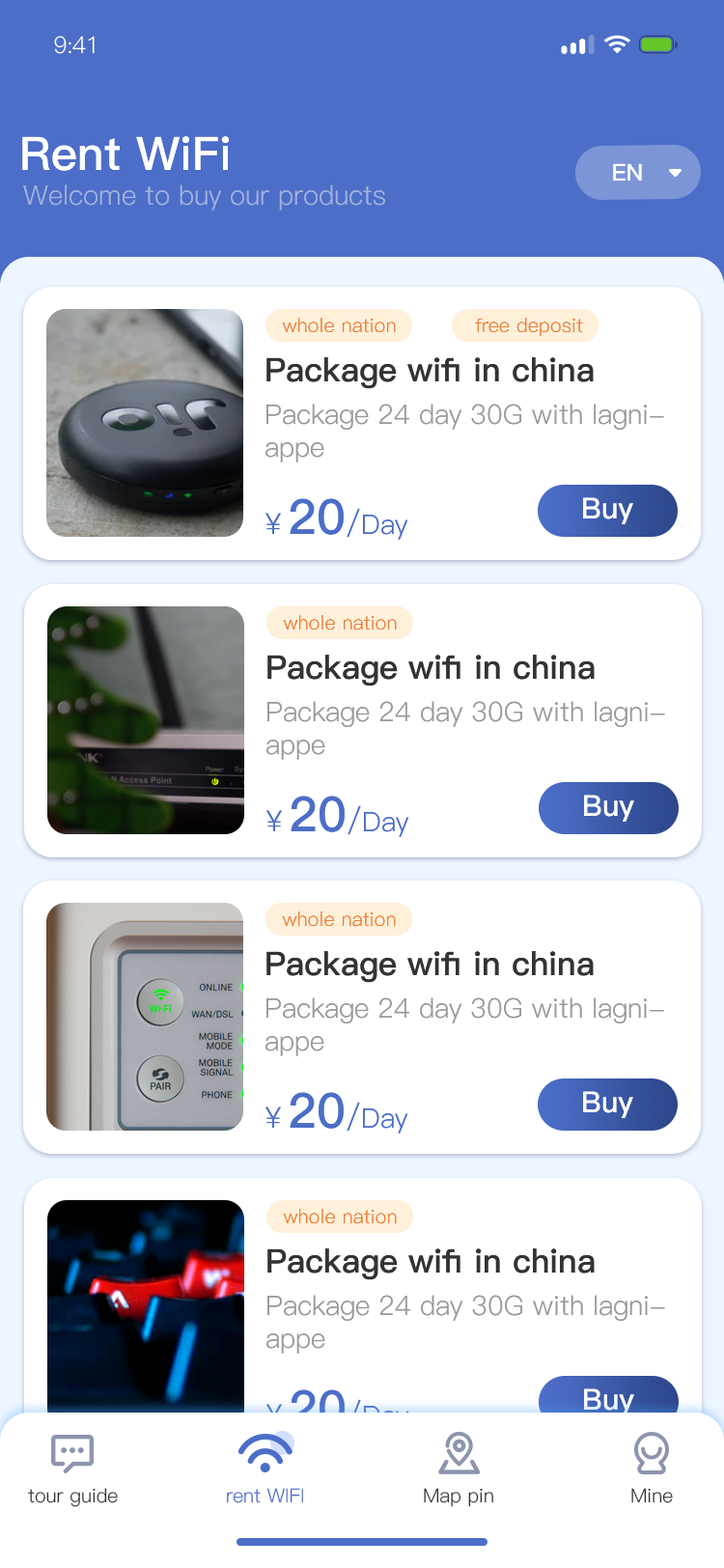
<style>
.page{position:relative;width:724px;height:1568px;background:#ffffff}
.page>*{position:absolute;margin:0}
.t1{font:23.2px "PingFang-SC-Regular";letter-spacing:-0.025em;color:#ffffff}
.t2{font:46.3px "PingFang-SC-Bold";color:#ffffff}
.t3{font:23.2px "PingFang-SC-Bold";color:#ffffff}
.t4{font:27px "PingFang-SC-Regular";color:#a3b2dd}
.t5{font:19.3px "PingFang-SC-Regular";color:#ee7d39}
.t6{font:32.8px "PingFang-SC-Bold";color:#333333}
.t7{font:32.8px "PingFang-SC-Bold";color:#333333;text-transform:uppercase}
.t8{font:27px "PingFang-SC-Regular";color:#999999}
.t9{font:29px "PingFang-SC-Bold";color:#ffffff}
.t10{font:27px "PingFang-SC-Regular";color:#4c6ec8}
.t11{font:29px "PingFang-SC-Regular";color:#4c6ec8}
.t12{font:48.3px "PingFang-SC-Bold";color:#4c6ec8}
.t13{font:30.9px "PingFang-SC-Regular";color:#4c6ec8}
.t14{font:27px "PingFang-SC-Regular"}
.t15{font:29px "PingFang-SC-Regular"}
.t16{font:48.3px "PingFang-SC-Bold"}
.t17{font:30.9px "PingFang-SC-Regular"}
.t18{font:19.3px "PingFang-SC-Regular";color:#333333}
.t19{font:19.3px "PingFang-SC-Regular";color:#4c6ec8}
</style>
<div class="page">
<p class="t1" style="left:54px;top:36px;width:41px;height:18px">9:41</p>
<p class="t2" style="left:22px;top:136px;width:207px;height:35px">Rent WiFi</p>
<p class="t3" style="left:613px;top:163px;width:29px;height:18px">EN</p>
<p class="t4" style="left:23px;top:184px;width:362px;height:26px">Welcome to buy our products</p>
<p class="t5" style="left:282px;top:318px;width:114px;height:14px">whole nation</p>
<p class="t5" style="left:475px;top:318px;width:108px;height:18px">free deposit</p>
<p class="t6" style="left:266px;top:357px;width:328px;height:32px"><span class="t7">p</span>ackage wifi in china</p>
<p class="t8" style="left:266px;top:404px;width:398px;height:58px">Package 24 day 30G with lagni-<br>appe</p>
<p class="t9" style="left:583px;top:497px;width:50px;height:27px">Buy</p>
<p class="t10" style="left:266px;top:498px;width:142px;height:42px"><span class="t11">￥</span><span class="t12">20</span><span class="t13">/</span>Day</p>
<p class="t5" style="left:283px;top:615px;width:114px;height:15px">whole nation</p>
<p class="t6" style="left:267px;top:655px;width:328px;height:31px"><span class="t7">p</span>ackage wifi in china</p>
<p class="t8" style="left:266px;top:701px;width:399px;height:59px">Package 24 day 30G with lagni-<br>appe</p>
<p class="t10" style="left:266px;top:796px;width:143px;height:41px"><span class="t11">￥</span><span class="t12">20</span><span class="t13">/</span>Day</p>
<p class="t9" style="left:584px;top:795px;width:50px;height:27px">Buy</p>
<p class="t5" style="left:282px;top:911px;width:114px;height:15px">whole nation</p>
<p class="t6" style="left:266px;top:951px;width:328px;height:32px"><span class="t7">p</span>ackage wifi in china</p>
<p class="t8" style="left:266px;top:997px;width:398px;height:59px">Package 24 day 30G with lagni-<br>appe</p>
<p class="t10" style="left:266px;top:1092px;width:142px;height:42px"><span class="t11">￥</span><span class="t12">20</span><span class="t13">/</span>Day</p>
<p class="t9" style="left:583px;top:1091px;width:50px;height:27px">Buy</p>
<p class="t5" style="left:283px;top:1209px;width:114px;height:14px">whole nation</p>
<p class="t6" style="left:267px;top:1248px;width:328px;height:32px"><span class="t7">p</span>ackage wifi in china</p>
<p class="t8" style="left:266px;top:1295px;width:399px;height:59px">Package 24 day 30G with lagni-<br>appe</p>
<p class="t14" style="left:266px;top:1389px;width:143px;height:42px"><span class="t15">￥</span><span class="t16">20</span><span class="t17">/</span>Day</p>
<p class="t9" style="left:584px;top:1388px;width:50px;height:27px">Buy</p>
<p class="t18" style="left:28px;top:1488px;width:90px;height:19px">tour guide</p>
<p class="t19" style="left:227px;top:1488px;width:76px;height:15px">rent WIFI</p>
<p class="t18" style="left:424px;top:1488px;width:69px;height:19px">Map pin</p>
<p class="t18" style="left:631px;top:1488px;width:42px;height:15px">Mine</p>
</div>
